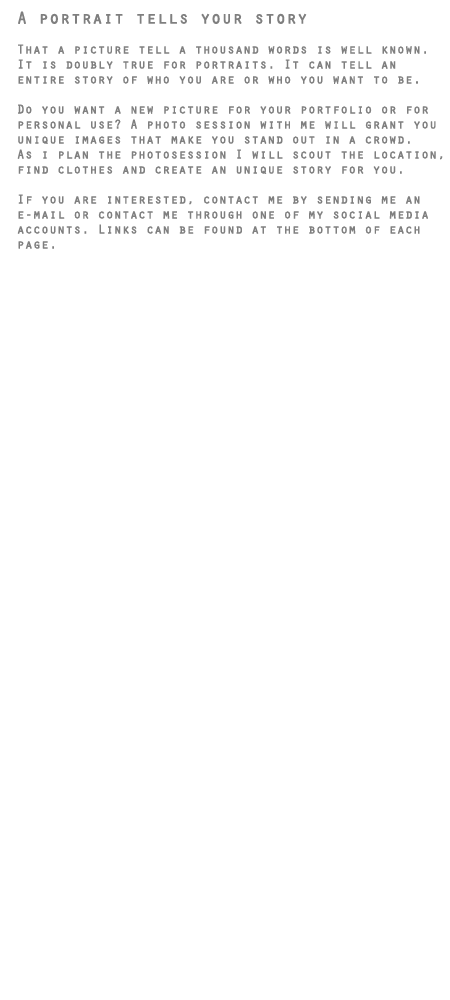
<style>
.page{position:relative;width:450px;height:1000px;background:#ffffff}
.page>*{position:absolute;margin:0}
.t1{font:12.5px "Orator-Regular";color:#7f7f7f;font-weight:bold}
.t2{font:16.7px "Orator-Regular";color:#7f7f7f;font-weight:bold}
</style>
<div class="page">
<p class="t1" style="left:17px;top:11px;width:426px;height:238px;text-align:right"><span class="t2">A portrait tells your story<br></span><br>That a picture tell a thousand words is well known.<br>It is doubly true for portraits. It can tell an <br>entire story of who you are or who you want to be.<br><br>Do you want a new picture for your portfolio or for<br>personal use? A photo session with me will grant you<br>unique images that make you stand out in a crowd.<br>As i plan the photosession I will scout the location,<br>find clothes and create an unique story for you.<br><br>If you are interested, contact me by sending me an<br>e-mail or contact me through one of my social media<br>accounts. Links can be found at the bottom of each<br>page.</p>
</div>
